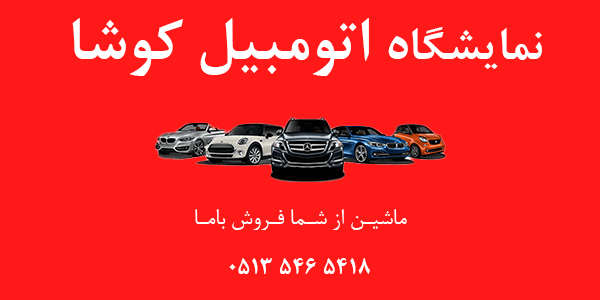
<style>
.page{position:relative;width:600px;height:300px;background:#ff1919}
.page>*{position:absolute;margin:0}
.t1{font:66.7px "2--NazaninBold";color:#ffffff}
.t2{font:50px "2--NazaninBold";color:#ffffff}
.t3{font:25px "2--Nazanin";color:#ffffff}
.t4{font:25px "BNazaninBold";color:#ffffff}
</style>
<div class="page">
<p class="t1" style="left:72px;top:18px;width:470px;height:58px"><span class="t2">نمایشگا</span>ه اتومبیل کوشا</p>
<p class="t3" style="left:195px;top:209px;width:212px;height:21px">ماشین از شما فروش باما ...</p>
<p class="t4" style="left:229px;top:258px;width:141px;height:16px">0513 546 5418</p>
</div>
